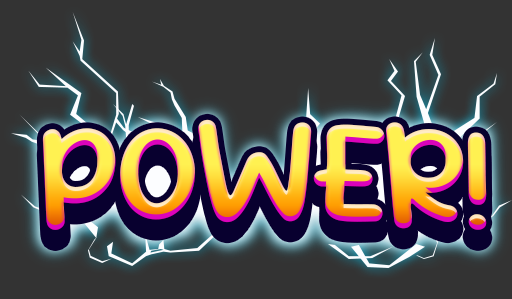
<style>
.page{position:relative;width:512px;height:299px;background:#333333}
.page>*{position:absolute;margin:0}
.t1{font:119px "Bodo-Amat";letter-spacing:-0.025em}
</style>
<div class="page">
<p class="t1" style="left:42px;top:119px;width:445px;height:111px">POWER!</p>
</div>
